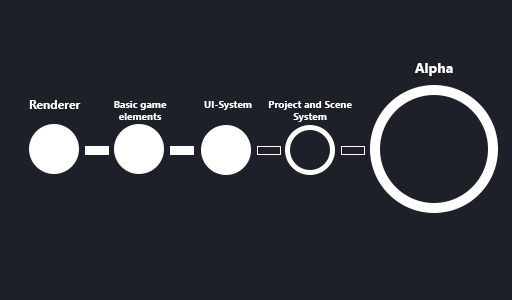
<style>
.page{position:relative;width:512px;height:300px;background:#1d2028}
.page>*{position:absolute;margin:0}
.t1{font:14px "SegoeUI-Bold";color:#ffffff}
.t2{font:12px "SegoeUI-Bold";color:#ffffff}
.t3{font:10px "SegoeUI-Bold";color:#ffffff}
</style>
<div class="page">
<p class="t1" style="left:414px;top:63px;width:39px;height:13px">Alpha</p>
<p class="t2" style="left:29px;top:100px;width:52px;height:9px">Renderer</p>
<p class="t3" style="left:114px;top:101px;width:53px;height:19px;text-align:center">Basic game<br>elements</p>
<p class="t3" style="left:204px;top:101px;width:48px;height:9px">UI-System</p>
<p class="t3" style="left:268px;top:101px;width:84px;height:21px;text-align:center">Project and Scene<br>System</p>
</div>
